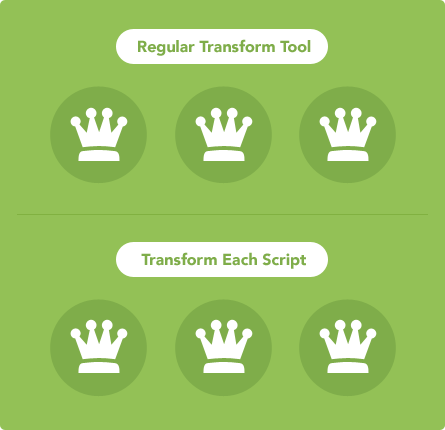
<style>
.page{position:relative;width:445px;height:430px;background:#93c156}
.page>*{position:absolute;margin:0}
.t1{font:16px "Avenir-Black";color:#7fad4a}
</style>
<div class="page">
<p class="t1" style="left:138px;top:39px;width:173px;height:17px">Regular Transform Tool</p>
<p class="t1" style="left:141px;top:252px;width:165px;height:17px">Transform Each Script</p>
</div>
